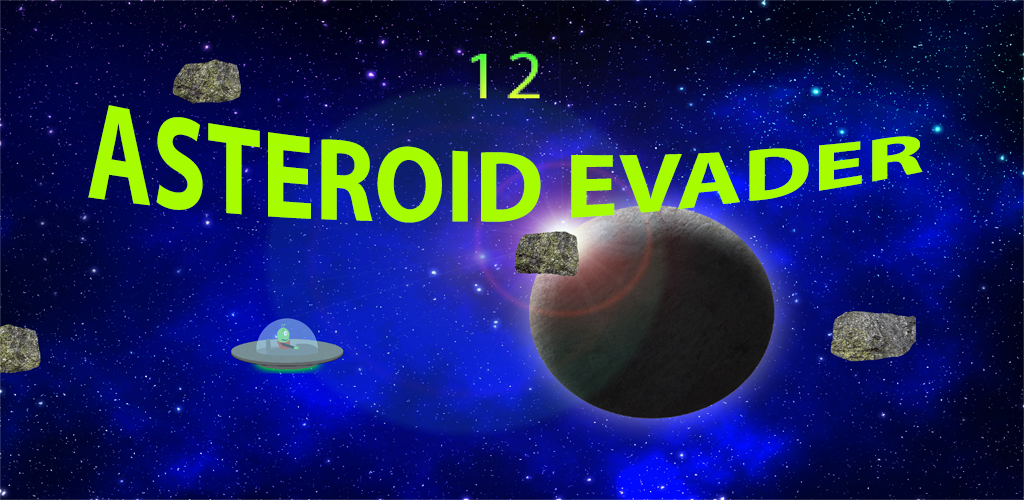
<style>
.page{position:relative;width:1024px;height:500px}
.page>*{position:absolute;margin:0}
.t1{font:100px "MyriadPro-Bold";color:#a7fd00}
</style>
<div class="page">
<p class="t1" style="left:88px;top:105px;width:835px;height:118px">ASTEROID EVADER</p>
</div>
